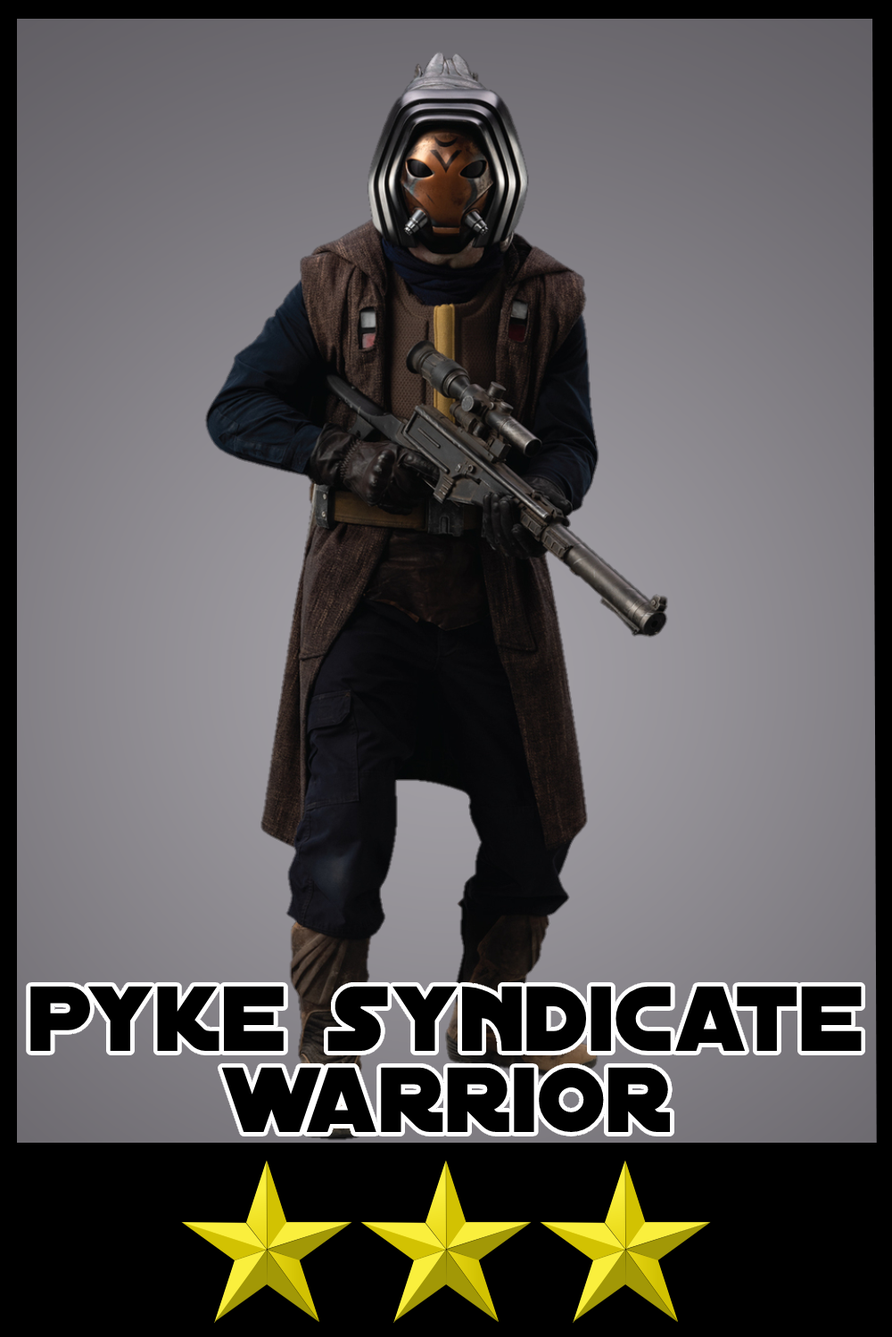
<style>
.page{position:relative;width:892px;height:1337px}
.page>*{position:absolute;margin:0}
.t1{font:99.2px/81.1px "DistantGalaxy";color:#000000}
</style>
<div class="page">
<p class="t1" style="left:30px;top:986px;width:831px;height:146px;text-align:center">pyke syndicate<br>warrior</p>
</div>
